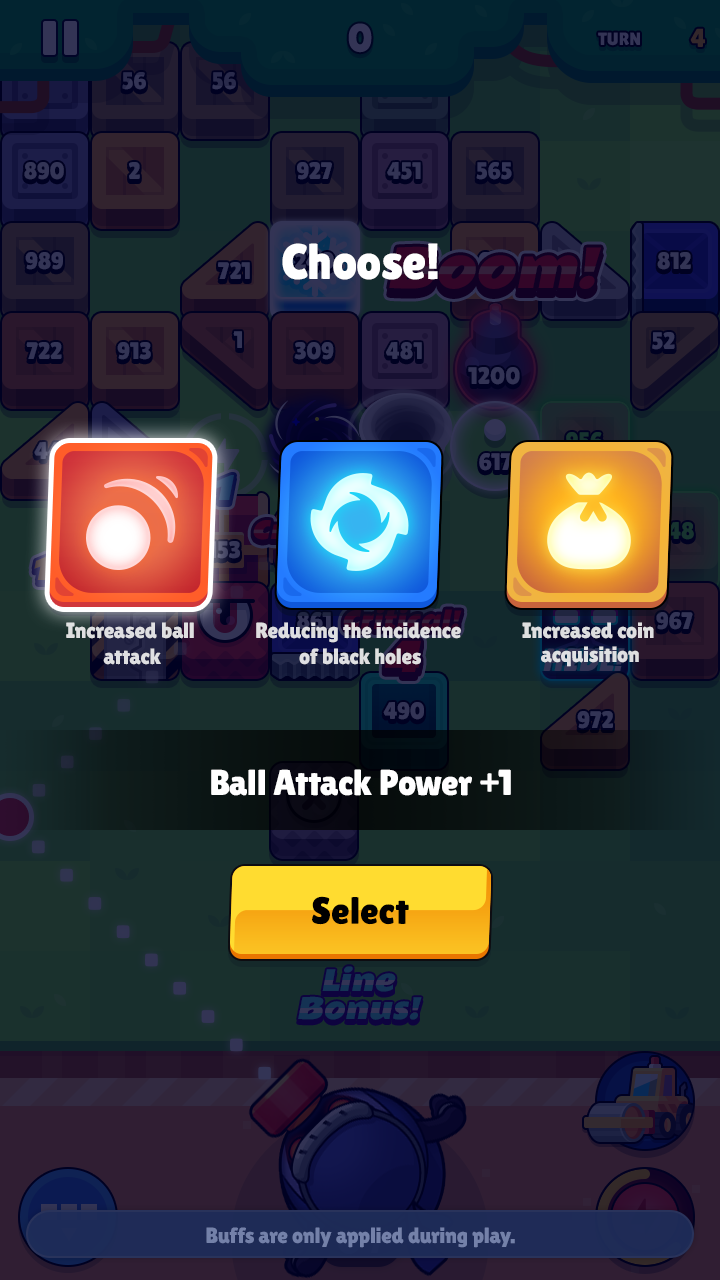
<style>
.page{position:relative;width:720px;height:1280px}
.page>*{position:absolute;margin:0}
.t1{font:50px "LilitaOne";color:#ffffff}
.t2{font:22px "LilitaOne";color:#dfdfe1}
.t3{font:22px "LilitaOne";color:#dedee0}
.t4{font:22px/24px "LilitaOne";color:#dedfe1}
.t5{font:36px "LilitaOne";color:#ffffff}
.t6{font:38px "LilitaOne";color:#000000}
.t7{font:22px "LilitaOne";color:#7481a9}
</style>
<div class="page">
<p class="t1" style="left:282px;top:243px;width:156px;height:37px">Choose!</p>
<p class="t2" style="left:66px;top:622px;width:128px;height:43px;text-align:center">Increased ball <br>attack</p>
<p class="t3" style="left:256px;top:622px;width:205px;height:43px;text-align:center">Reducing the incidence <br>of black holes</p>
<p class="t4" style="left:522px;top:622px;width:132px;height:45px;text-align:center">Increased coin <br>acquisition</p>
<p class="t5" style="left:211px;top:769px;width:300px;height:27px">Ball Attack Power +1</p>
<p class="t6" style="left:312px;top:896px;width:97px;height:29px">Select</p>
<p class="t7" style="left:206px;top:1227px;width:309px;height:21px">Buffs are only applied during play.</p>
</div>
